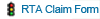
<style>
.page{position:relative;width:100px;height:19px;background:#ffffff}
.page>*{position:absolute;margin:0}
.t1{font:11px "ArialMT";letter-spacing:-0.02em;color:#0a71a4}
</style>
<div class="page">
<p class="t1" style="left:22px;top:5px;width:77px;height:8px">RTA Claim Form</p>
</div>
